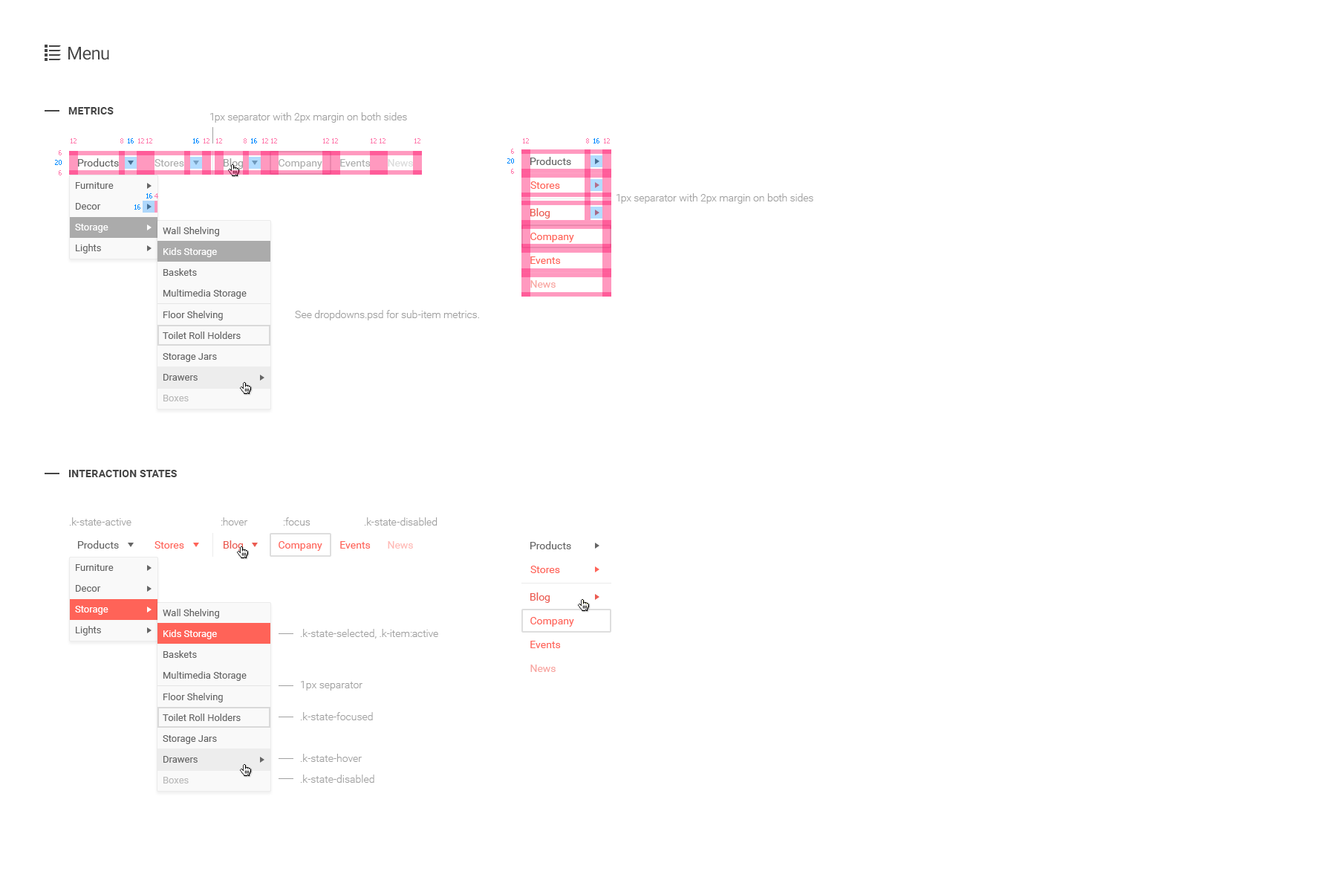
<style>
.page{position:relative;width:1337px;height:892px;background:#ffffff}
.page>*{position:absolute;margin:0}
.t1{font:17.8px "Roboto-Regular";letter-spacing:-0.025em;color:#454545}
.t2{font:10.4px "Roboto-Bold";letter-spacing:0.01em;color:#454545;text-transform:uppercase}
.t3{font:10.4px "Roboto-Light";color:#a1a1a1}
.t4{font:6.7px "Tahoma";color:#ff7cae}
.t5{font:6.7px "Tahoma";color:#008aff}
.t6{font:10.4px "Roboto-Regular";color:#656565}
.t7{font:10.4px "Roboto-Regular";color:#ababab}
.t8{font:10.4px "Roboto-Regular";color:#9e9e9e}
.t9{font:10.4px "Roboto-Regular";color:#dbdbdb}
.t10{font:9.7px/20.8px "Roboto-Regular";color:#656565}
.t11{font:9.7px/20.8px "Roboto-Regular";color:#ffffff}
.t12{font:10.4px "Roboto-Regular";color:#ff6358}
.t13{font:10.4px "Roboto-Regular";color:#eb5b51}
.t14{font:9.7px/21.5px "Roboto-Regular";color:#656565}
.t15{font:9.7px/20.8px "Roboto-Regular";color:#bababa}
.t16{font:10.4px "Roboto-Regular";color:#f8a6a1}
.t17{font:10.4px "Roboto-Regular";color:#ffbbb7}
.t18{font:10.4px/20.8px "Roboto-Light";color:#a1a1a1}
</style>
<div class="page">
<p class="t1" style="left:68px;top:47px;width:41px;height:13px">Menu</p>
<p class="t2" style="left:68px;top:107px;width:46px;height:7px">Metrics</p>
<p class="t3" style="left:210px;top:112px;width:197px;height:11px">1px separator with 2px margin on both sides</p>
<p class="t4" style="left:71px;top:138px;width:6px;height:5px">12</p>
<p class="t4" style="left:120px;top:138px;width:3px;height:5px">8</p>
<p class="t5" style="left:128px;top:138px;width:6px;height:5px">16</p>
<p class="t4" style="left:138px;top:138px;width:6px;height:5px">12</p>
<p class="t4" style="left:146px;top:138px;width:6px;height:5px">12</p>
<p class="t5" style="left:193px;top:138px;width:6px;height:5px">16</p>
<p class="t4" style="left:204px;top:138px;width:6px;height:5px">12</p>
<p class="t4" style="left:216px;top:138px;width:6px;height:5px">12</p>
<p class="t4" style="left:244px;top:138px;width:3px;height:5px">8</p>
<p class="t5" style="left:251px;top:138px;width:6px;height:5px">16</p>
<p class="t4" style="left:262px;top:138px;width:6px;height:5px">12</p>
<p class="t4" style="left:271px;top:138px;width:6px;height:5px">12</p>
<p class="t4" style="left:323px;top:138px;width:6px;height:5px">12</p>
<p class="t4" style="left:332px;top:138px;width:6px;height:5px">12</p>
<p class="t4" style="left:371px;top:138px;width:6px;height:5px">12</p>
<p class="t4" style="left:380px;top:138px;width:6px;height:5px">12</p>
<p class="t4" style="left:415px;top:138px;width:6px;height:5px">12</p>
<p class="t4" style="left:511px;top:149px;width:3px;height:5px">6</p>
<p class="t4" style="left:523px;top:138px;width:6px;height:5px">12</p>
<p class="t4" style="left:586px;top:138px;width:3px;height:5px">8</p>
<p class="t5" style="left:594px;top:138px;width:6px;height:5px">16</p>
<p class="t4" style="left:604px;top:138px;width:6px;height:5px">12</p>
<p class="t5" style="left:55px;top:160px;width:7px;height:5px">20</p>
<p class="t4" style="left:59px;top:150px;width:3px;height:5px">6</p>
<p class="t6" style="left:78px;top:158px;width:41px;height:8px">Products</p>
<p class="t7" style="left:155px;top:159px;width:29px;height:7px">Stores</p>
<p class="t8" style="left:224px;top:158px;width:19px;height:11px">Blog</p>
<p class="t7" style="left:279px;top:159px;width:43px;height:10px">Company</p>
<p class="t7" style="left:340px;top:159px;width:31px;height:7px">Events</p>
<p class="t9" style="left:388px;top:159px;width:25px;height:7px">News</p>
<p class="t5" style="left:507px;top:158px;width:7px;height:5px">20</p>
<p class="t6" style="left:531px;top:157px;width:40px;height:8px">Products</p>
<p class="t4" style="left:59px;top:170px;width:3px;height:5px">6</p>
<p class="t4" style="left:511px;top:169px;width:3px;height:5px">6</p>
<p class="t10" style="left:75px;top:182px;width:39px;height:71px">Furniture<br>Decor<br><span class="t11">Storage<br></span>Lights</p>
<p class="t12" style="left:531px;top:181px;width:29px;height:8px">Stores</p>
<p class="t5" style="left:146px;top:193px;width:6px;height:5px">16</p>
<p class="t4" style="left:155px;top:193px;width:3px;height:5px">4</p>
<p class="t3" style="left:617px;top:193px;width:197px;height:11px">1px separator with 2px margin on both sides</p>
<p class="t5" style="left:134px;top:204px;width:6px;height:6px">16</p>
<p class="t13" style="left:531px;top:208px;width:19px;height:10px">Blog</p>
<p class="t10" style="left:163px;top:227px;width:84px;height:174px">Wall Shelving<br><span class="t11">Kids Storage<br></span>Baskets<br>Multimedia Storage<br><span class="t14">Floor Shelving<br></span>Toilet Roll Holders<br>Storage Jars<br>Drawers<br><span class="t15">Boxes</span></p>
<p class="t12" style="left:531px;top:233px;width:43px;height:9px">Company</p>
<p class="t12" style="left:531px;top:256px;width:30px;height:8px">Events</p>
<p class="t16" style="left:531px;top:280px;width:25px;height:8px">News</p>
<p class="t3" style="left:295px;top:310px;width:184px;height:10px">See dropdowns.psd for sub-item metrics.</p>
<p class="t2" style="left:68px;top:470px;width:109px;height:7px">Interaction states</p>
<p class="t3" style="left:69px;top:517px;width:63px;height:8px">.k-state-active</p>
<p class="t3" style="left:221px;top:517px;width:27px;height:8px">:hover</p>
<p class="t3" style="left:283px;top:517px;width:28px;height:8px">:focus</p>
<p class="t3" style="left:364px;top:517px;width:74px;height:8px">.k-state-disabled</p>
<p class="t6" style="left:78px;top:540px;width:41px;height:8px">Products</p>
<p class="t12" style="left:155px;top:541px;width:29px;height:7px">Stores</p>
<p class="t13" style="left:224px;top:540px;width:19px;height:11px">Blog</p>
<p class="t12" style="left:279px;top:541px;width:43px;height:10px">Company</p>
<p class="t12" style="left:340px;top:541px;width:31px;height:7px">Events</p>
<p class="t17" style="left:388px;top:541px;width:25px;height:7px">News</p>
<p class="t6" style="left:531px;top:541px;width:40px;height:8px">Products</p>
<p class="t10" style="left:75px;top:564px;width:39px;height:71px">Furniture<br>Decor<br><span class="t11">Storage<br></span>Lights</p>
<p class="t12" style="left:531px;top:565px;width:29px;height:8px">Stores</p>
<p class="t13" style="left:531px;top:592px;width:19px;height:11px">Blog</p>
<p class="t10" style="left:163px;top:609px;width:84px;height:174px">Wall Shelving<br><span class="t11">Kids Storage<br></span>Baskets<br>Multimedia Storage<br><span class="t14">Floor Shelving<br></span>Toilet Roll Holders<br>Storage Jars<br>Drawers<br><span class="t15">Boxes</span></p>
<p class="t12" style="left:531px;top:617px;width:43px;height:9px">Company</p>
<p class="t18" style="left:300px;top:629px;width:138px;height:153px">.k-state-selected, .k-item:active<br><br><br><br>.k-state-focused<br><br>.k-state-hover<br>.k-state-disabled</p>
<p class="t12" style="left:531px;top:640px;width:30px;height:8px">Events</p>
<p class="t16" style="left:531px;top:664px;width:25px;height:8px">News</p>
<p class="t3" style="left:301px;top:681px;width:62px;height:9px">1px separator</p>
</div>
